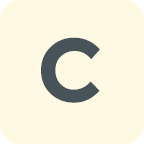
<style>
.page{position:relative;width:144px;height:144px;background:#fef9e3}
.page>*{position:absolute;margin:0}
.t1{font:90px "Montserrat-Bold";color:#485259}
</style>
<div class="page">
<p class="t1" style="left:41px;top:37px;width:59px;height:66px">C</p>
</div>
